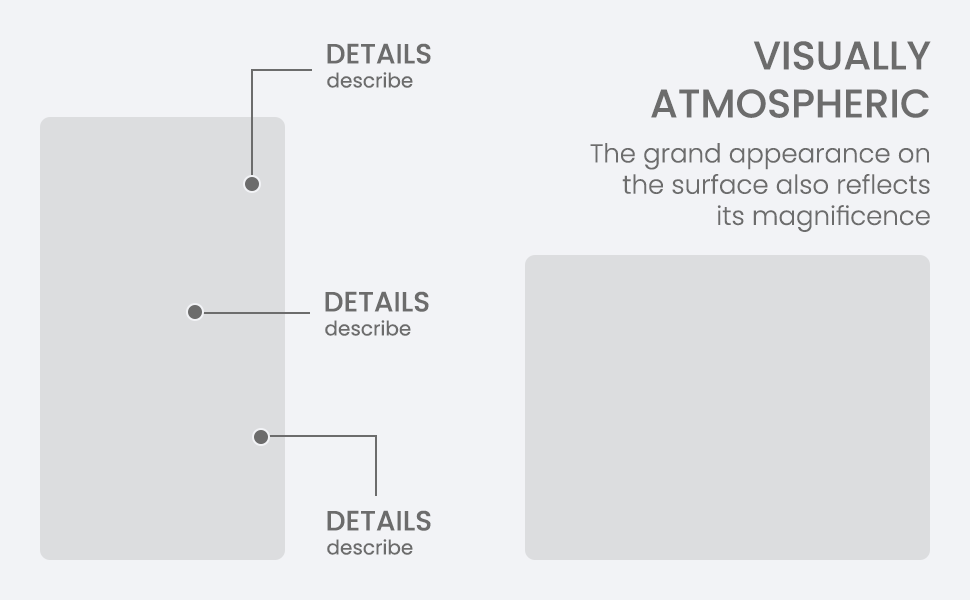
<style>
.page{position:relative;width:970px;height:600px;background:#f2f3f6}
.page>*{position:absolute;margin:0}
.t1{font:40px "Poppins-Medium";color:#6c6c6c}
.t2{font:28px "Poppins-Medium";color:#6c6c6c;text-transform:uppercase}
.t3{font:20px "Poppins-Regular";color:#6c6c6c}
.t4{font:26px "Poppins-Light";color:#6c6c6c}
</style>
<div class="page">
<p class="t1" style="left:651px;top:41px;width:280px;height:77px;text-align:right">VISUALLY<br>ATMOSPHERIC</p>
<p class="t2" style="left:327px;top:43px;width:104px;height:21px">details</p>
<p class="t3" style="left:327px;top:72px;width:86px;height:16px">describe</p>
<p class="t4" style="left:590px;top:143px;width:340px;height:89px;text-align:right">The grand appearance on<br> the surface also reflects<br>its magnificence</p>
<p class="t2" style="left:325px;top:291px;width:104px;height:21px">details</p>
<p class="t3" style="left:325px;top:320px;width:86px;height:16px">describe</p>
<p class="t2" style="left:327px;top:510px;width:104px;height:21px">details</p>
<p class="t3" style="left:327px;top:539px;width:86px;height:16px">describe</p>
</div>
